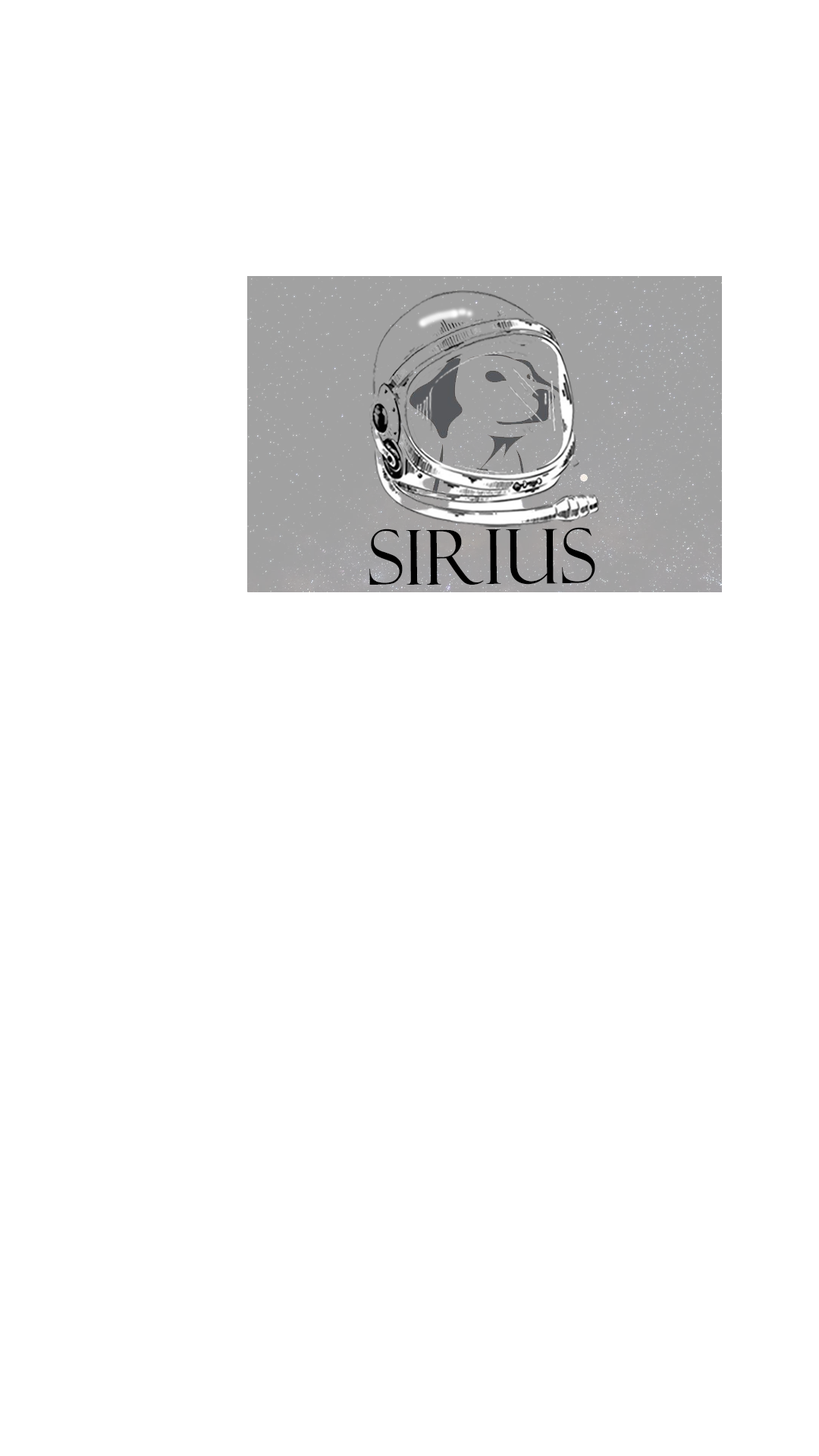
<style>
.page{position:relative;width:819px;height:1456px;background:#ffffff}
.page>*{position:absolute;margin:0}
.t1{font:75.8px "FelixTitlingMT";color:#000000}
.t2{font:37.9px "MyriadPro-Regular";color:#000000}
</style>
<div class="page">
<p class="t1" style="left:369px;top:527px;width:226px;height:58px;rotate:-1deg"><span class="t2">        </span>Sirius</p>
</div>
